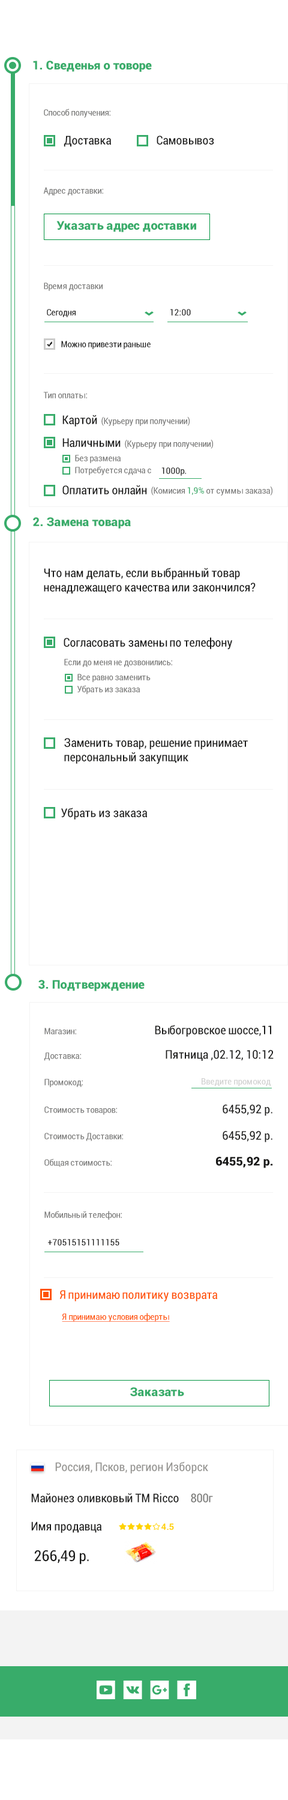
<style>
.page{position:relative;width:288px;height:1800px;background:#ffffff}
.page>*{position:absolute;margin:0}
.t1{font:12px "Roboto-Black";color:#38ac6a}
.t2{font:9px "Roboto-Condensed";color:#797978}
.t3{font:12px "Roboto-Condensed";color:#1a1a19}
.t4{font:9px "Roboto-Condensed";color:#1a1a19}
.t5{font:9px "Roboto-Condensed";color:#38ac6a}
.t6{font:9px "Roboto-Condensed";color:#d0d0cf}
.t7{font:12px "Roboto-Black";color:#1a1a19}
.t8{font:12px "Roboto-Condensed";color:#ff5200}
.t9{font:9px "Roboto-Condensed";color:#ff5200;text-decoration:underline}
.t10{font:12px "Roboto-Condensed";color:#959491}
.t11{font:12px "Roboto-Condensed";color:#797977}
.t12{font:9px "Roboto-Bold";color:#ffd200}
.t13{font:15px "Roboto-Condensed";color:#1a1a19}
</style>
<div class="page">
<p class="t1" style="left:33px;top:61px;width:119px;height:11px">1. Сведенья о товоре</p>
<p class="t2" style="left:44px;top:109px;width:66px;height:9px">Способ получения:</p>
<p class="t3" style="left:64px;top:136px;width:47px;height:11px">Доставка</p>
<p class="t3" style="left:157px;top:136px;width:57px;height:9px">Самовывоз</p>
<p class="t2" style="left:43px;top:187px;width:60px;height:9px">Адрес доставки:</p>
<p class="t1" style="left:56px;top:221px;width:140px;height:11px">Указать адрес доставки</p>
<p class="t2" style="left:44px;top:283px;width:59px;height:8px">Время доставки</p>
<p class="t4" style="left:47px;top:309px;width:29px;height:8px">Сегодня</p>
<p class="t4" style="left:170px;top:309px;width:21px;height:7px">12:00</p>
<p class="t4" style="left:61px;top:341px;width:90px;height:8px">Можно привезти раньше</p>
<p class="t2" style="left:43px;top:392px;width:44px;height:6px">Тип оплаты:</p>
<p class="t3" style="left:62px;top:415px;width:35px;height:12px">Картой</p>
<p class="t2" style="left:101px;top:416px;width:89px;height:10px">(Курьеру при получении)</p>
<p class="t3" style="left:62px;top:438px;width:59px;height:9px">Наличными</p>
<p class="t2" style="left:125px;top:439px;width:88px;height:10px">(Курьеру при получении)</p>
<p class="t2" style="left:75px;top:455px;width:46px;height:8px">Без размена</p>
<p class="t2" style="left:75px;top:466px;width:76px;height:9px">Потребуется сдача с</p>
<p class="t4" style="left:161px;top:467px;width:25px;height:9px">1000р.</p>
<p class="t3" style="left:62px;top:485px;width:85px;height:9px">Оплатить онлайн</p>
<p class="t2" style="left:151px;top:486px;width:121px;height:10px">(Комисия <span class="t5">1,9%</span> от суммы заказа)</p>
<p class="t1" style="left:33px;top:517px;width:98px;height:12px">2. Замена товара</p>
<p class="t3" style="left:44px;top:568px;width:212px;height:26px">Что нам делать, если выбранный товар <br>ненадлежащего качества или закончился?</p>
<p class="t3" style="left:64px;top:637px;width:168px;height:12px">Согласовать замены по телефону</p>
<p class="t2" style="left:64px;top:659px;width:108px;height:8px">Если до меня не дозвонились:</p>
<p class="t2" style="left:77px;top:674px;width:74px;height:8px">Все равно заменить</p>
<p class="t2" style="left:77px;top:685px;width:63px;height:9px">Убрать из заказа</p>
<p class="t3" style="left:64px;top:738px;width:184px;height:26px">Заменить товар, решение принимает <br>персональный закупщик</p>
<p class="t3" style="left:61px;top:808px;width:86px;height:12px">Убрать из заказа</p>
<p class="t1" style="left:38px;top:980px;width:107px;height:11px">3. Подтверждение</p>
<p class="t3" style="left:155px;top:1025px;width:116px;height:12px">Выбогровское шоссе,11</p>
<p class="t2" style="left:44px;top:1028px;width:32px;height:6px">Магазин:</p>
<p class="t2" style="left:44px;top:1052px;width:37px;height:9px">Доставка:</p>
<p class="t3" style="left:166px;top:1050px;width:108px;height:11px">Пятница ,02.12, 10:12</p>
<p class="t2" style="left:44px;top:1079px;width:39px;height:8px">Промокод:</p>
<p class="t6" style="left:202px;top:1078px;width:69px;height:9px">Введите промокод</p>
<p class="t2" style="left:44px;top:1106px;width:73px;height:9px">Стоимость товаров:</p>
<p class="t3" style="left:223px;top:1105px;width:49px;height:11px">6455,92 р.</p>
<p class="t2" style="left:44px;top:1133px;width:79px;height:8px">Стоимость Доставки:</p>
<p class="t3" style="left:223px;top:1131px;width:49px;height:11px">6455,92 р.</p>
<p class="t7" style="left:216px;top:1157px;width:57px;height:11px">6455,92 р.</p>
<p class="t2" style="left:44px;top:1159px;width:68px;height:8px">Общая стоимость:</p>
<p class="t2" style="left:44px;top:1211px;width:78px;height:9px">Мобильный телефон:</p>
<p class="t4" style="left:48px;top:1239px;width:71px;height:7px">+70515151111155</p>
<p class="t8" style="left:59px;top:1290px;width:158px;height:11px">Я принимаю политику возврата</p>
<p class="t9" style="left:62px;top:1313px;width:108px;height:9px">Я принимаю условия оферты</p>
<p class="t1" style="left:130px;top:1387px;width:54px;height:9px">Заказать</p>
<p class="t10" style="left:55px;top:1462px;width:153px;height:12px">Россия, Псков, регион Изборск</p>
<p class="t3" style="left:31px;top:1493px;width:148px;height:9px">Майонез оливковый ТМ Ricco</p>
<p class="t11" style="left:191px;top:1493px;width:22px;height:9px">800г</p>
<p class="t3" style="left:31px;top:1522px;width:70px;height:11px">Имя продавца</p>
<p class="t12" style="left:161px;top:1523px;width:13px;height:7px">4.5</p>
<p class="t13" style="left:34px;top:1550px;width:55px;height:14px">266,49 р.</p>
</div>
